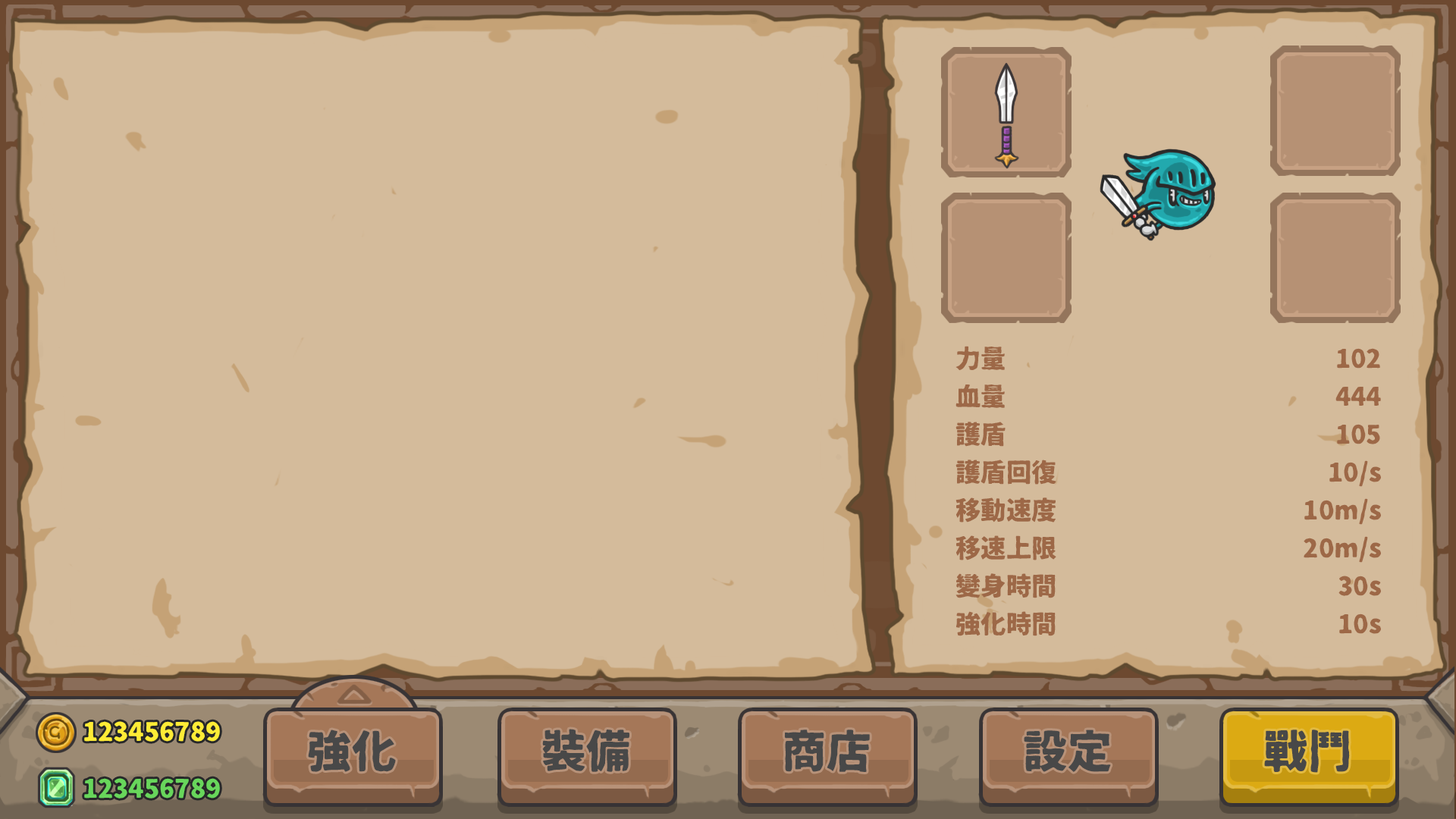
<style>
.page{position:relative;width:1456px;height:819px;background:#d4bb9b}
.page>*{position:absolute;margin:0}
.t1{font:25.3px/37.9px "07TetsubinGothic";color:#9d6847}
</style>
<div class="page">
<p class="t1" style="left:955px;top:346px;width:101px;height:290px">力量<br>血量<br>護盾<br>護盾回復<br>移動速度<br>移速上限<br>變身時間<br>強化時間</p>
<p class="t1" style="left:1304px;top:348px;width:77px;height:286px;text-align:right">102<br>444<br>105<br>10/s<br>10m/s<br>20m/s<br>30s<br>10s</p>
</div>
